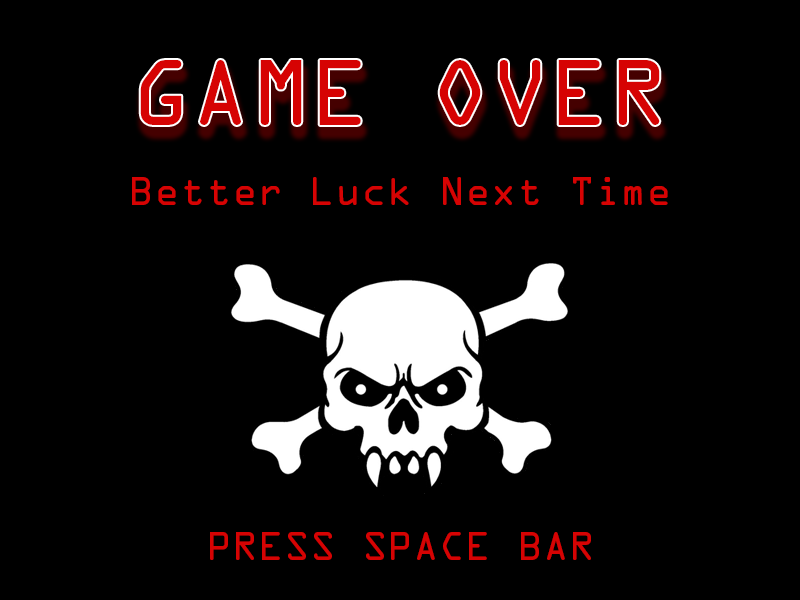
<style>
.page{position:relative;width:800px;height:600px;background:#000000}
.page>*{position:absolute;margin:0}
.t1{font:83px "OCRAStd";color:#d60303}
.t2{font:36px "OCRAStd";color:#d60303}
</style>
<div class="page">
<p class="t1" style="left:140px;top:60px;width:520px;height:65px">GAME OVER</p>
<p class="t2" style="left:132px;top:177px;width:536px;height:28px">Better Luck Next Time</p>
<p class="t2" style="left:210px;top:532px;width:381px;height:28px">PRESS SPACE BAR</p>
</div>
